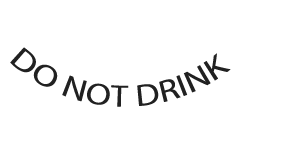
<style>
.page{position:relative;width:283px;height:142px;background:#ffffff}
.page>*{position:absolute;margin:0}
.t1{font:30px "MyriadPro-Regular";color:#212121}
</style>
<div class="page">
<p class="t1" style="left:10px;top:47px;width:221px;height:60px">DO NOT DRINK</p>
</div>
